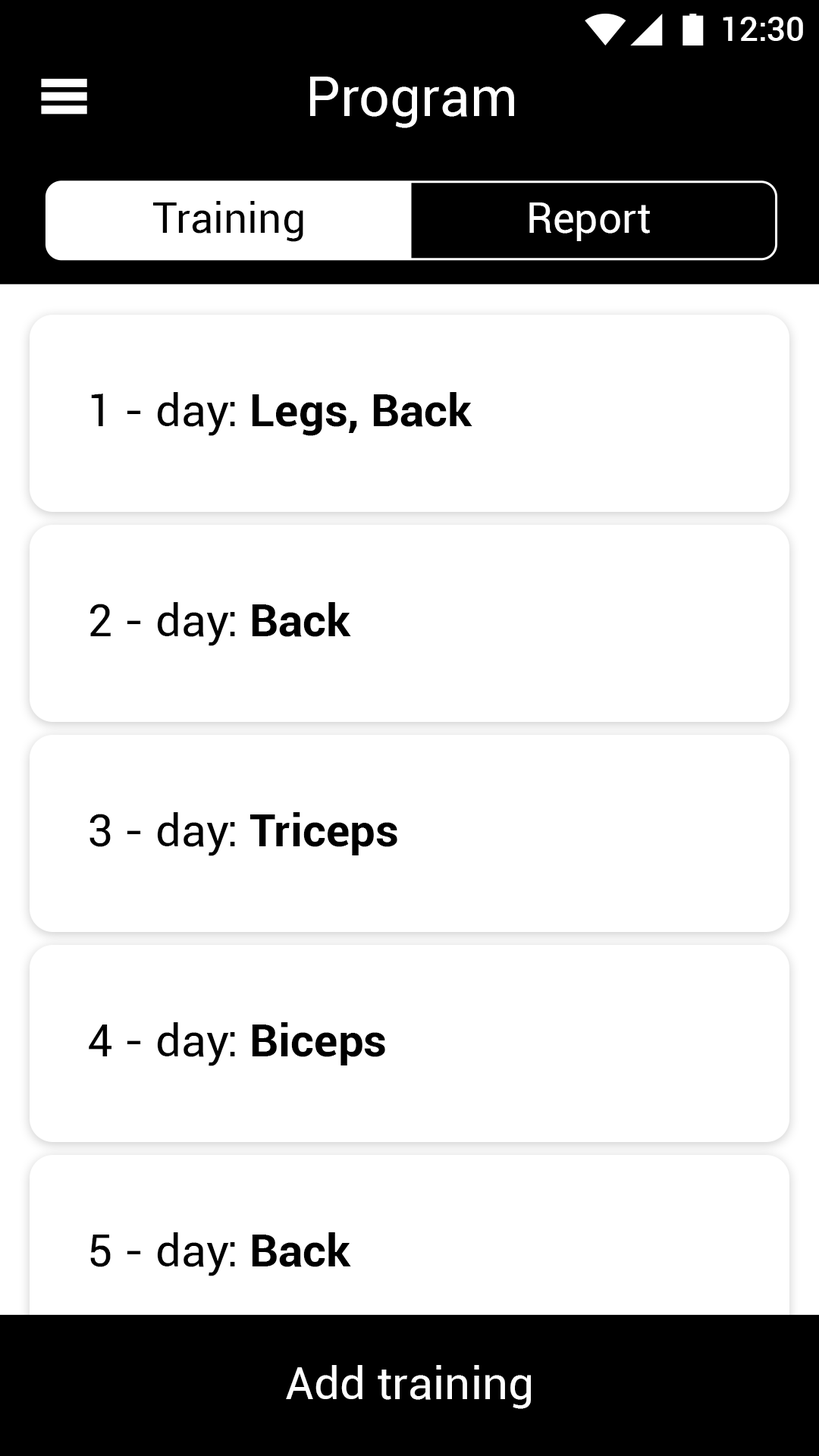
<style>
.page{position:relative;width:819px;height:1456px;background:#ffffff}
.page>*{position:absolute;margin:0}
.t1{font:33.4px "Roboto-Medium";color:#ffffff}
.t2{font:54.6px "Roboto-Regular";color:#ffffff}
.t3{font:41.7px "Roboto-Regular";color:#000000}
.t4{font:41.7px "Roboto-Regular";color:#ffffff}
.t5{font:45.5px "Roboto-Bold";color:#000000}
.t6{font:45.5px "Roboto-Regular";color:#000000}
.t7{font:45.5px "Roboto-Regular";color:#ffffff}
</style>
<div class="page">
<p class="t1" style="left:723px;top:17px;width:80px;height:24px">12:30</p>
<p class="t2" style="left:310px;top:77px;width:204px;height:51px">Program</p>
<p class="t3" style="left:153px;top:201px;width:150px;height:41px">Training</p>
<p class="t4" style="left:529px;top:202px;width:121px;height:39px">Report</p>
<p class="t5" style="left:91px;top:392px;width:381px;height:44px"><span class="t6">1 - day: </span>Legs, Back</p>
<p class="t6" style="left:90px;top:602px;width:261px;height:44px">2 - day: <span class="t5">Back</span></p>
<p class="t6" style="left:89px;top:812px;width:308px;height:44px">3 - day: <span class="t5">Triceps</span></p>
<p class="t6" style="left:89px;top:1022px;width:296px;height:44px">4 - day: <span class="t5">Biceps</span></p>
<p class="t6" style="left:90px;top:1232px;width:261px;height:44px">5 - day: <span class="t5">Back</span></p>
<p class="t7" style="left:286px;top:1365px;width:245px;height:44px">Add training</p>
</div>
